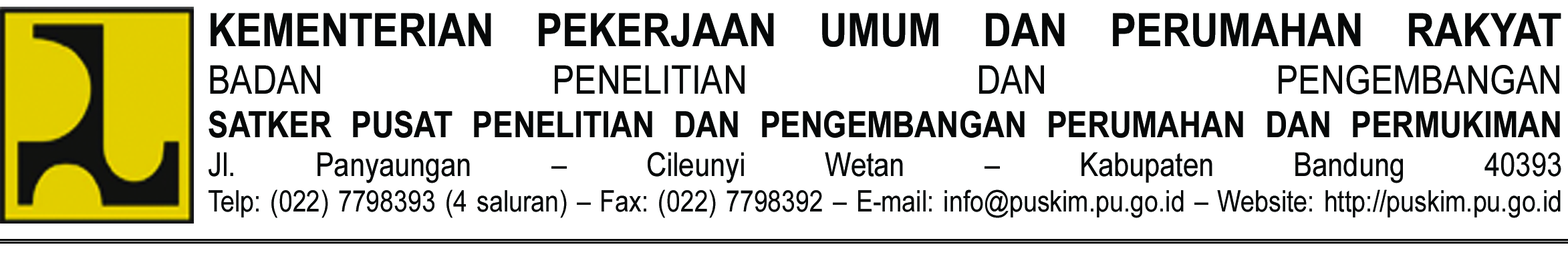
<style>
.page{position:relative;width:1568px;height:255px;background:#ffffff}
.page>*{position:absolute;margin:0}
.t1{font:29.5px "ArialMT";color:#060808;scale:0.85 1}
.t2{font:45.9px "Arial-BoldMT";color:#060808;scale:0.85 1}
.t3{font:39.4px "ArialMT";color:#060808;scale:0.85 1}
.t4{font:36.1px "Arial-BoldMT";color:#060808;scale:0.85 1}
.t5{font:32.8px "ArialMT";color:#060808;scale:0.85 1}
</style>
<div class="page">
<p class="t1" style="left:209px;top:13px;width:1352px;height:205px;text-align:justify"><span class="t2">KEMENTERIAN PEKERJAAN UMUM DAN PERUMAHAN RAKYAT<br></span><span class="t3">BADAN PENELITIAN DAN PENGEMBANGAN<br></span><span class="t4">SATKER PUSAT PENELITIAN DAN PENGEMBANGAN PERUMAHAN DAN PERMUKIMAN<br></span><span class="t5">Jl. Panyaungan – Cileunyi Wetan – Kabupaten Bandung 40393<br></span>Telp: (022) 7798393 (4 saluran) – Fax: (022) 7798392 – E-mail: info@puskim.pu.go.id – Website: http://puskim.pu.go.id</p>
</div>
